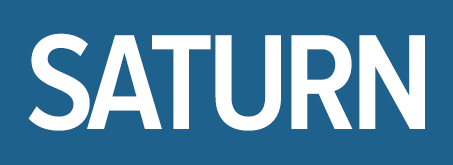
<style>
.page{position:relative;width:453px;height:165px;background:#1e618d}
.page>*{position:absolute;margin:0}
.t1{font:140px "ProximaNovaCond-Semibold";letter-spacing:-0.05em;color:#ffffff;text-transform:uppercase}
</style>
<div class="page">
<p class="t1" style="left:28px;top:33px;width:397px;height:98px">SATURN</p>
</div>
